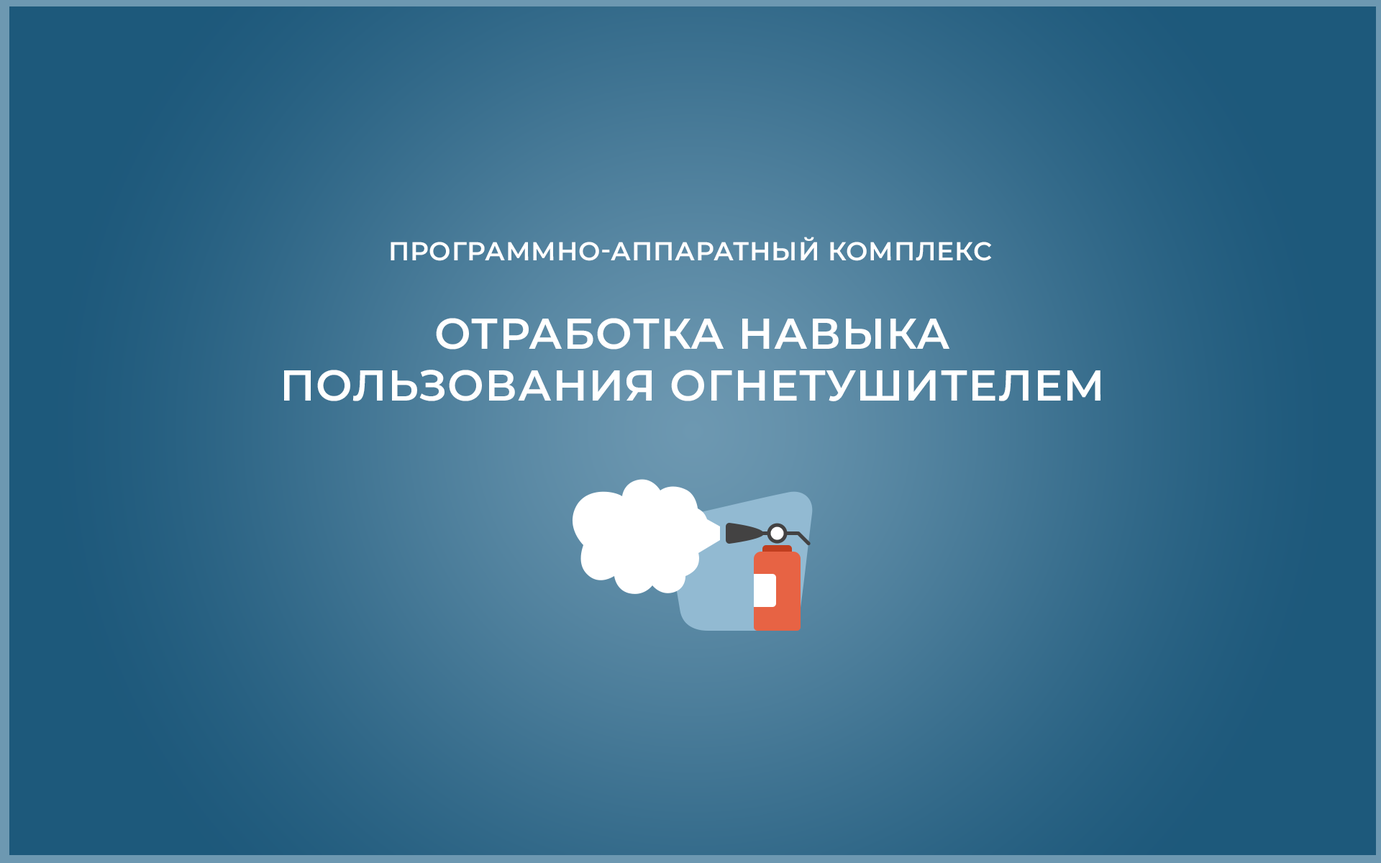
<style>
.page{position:relative;width:1381px;height:863px}
.page>*{position:absolute;margin:0}
.t1{font:25.9px "Montserrat-SemiBold";letter-spacing:0.02em;color:#ffffff;text-transform:uppercase}
.t2{font:43.2px "Montserrat-SemiBold";letter-spacing:0.02em;color:#ffffff;text-transform:uppercase}
</style>
<div class="page">
<p class="t1" style="left:391px;top:237px;width:601px;height:24px">Программно-аппаратный комплекс</p>
<p class="t2" style="left:284px;top:318px;width:817px;height:83px;text-align:center">Отработка навыка<br>пользования огнетушителем</p>
</div>
